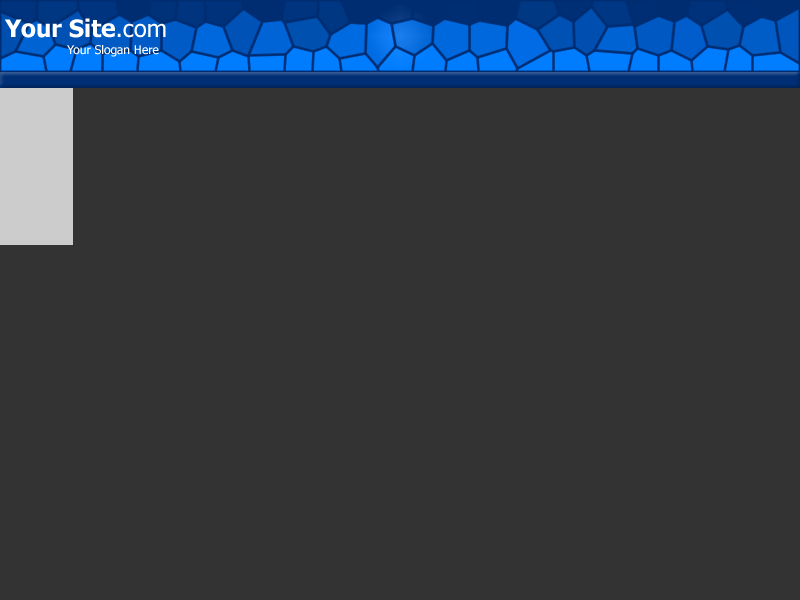
<style>
.page{position:relative;width:800px;height:600px;background:#333333}
.page>*{position:absolute;margin:0}
.t1{font:24px "Tahoma-Bold";color:#ffffff}
.t2{font:24px "Tahoma";color:#ffffff}
.t3{font:12px "Tahoma";color:#ffffff}
</style>
<div class="page">
<p class="t1" style="left:4px;top:18px;width:162px;height:20px">Your Site<span class="t2">.com</span></p>
<p class="t3" style="left:67px;top:45px;width:92px;height:12px">Your Slogan Here</p>
</div>
